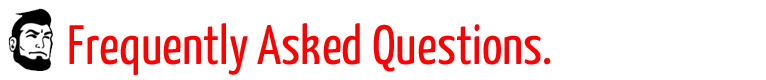
<style>
.page{position:relative;width:766px;height:80px;background:#ffffff}
.page>*{position:absolute;margin:0}
.t1{font:55.3px "YanoneKaffeesatz-Regular";color:#ff0000}
</style>
<div class="page">
<p class="t1" style="left:69px;top:23px;width:482px;height:52px">Frequently Asked Questions.</p>
</div>
